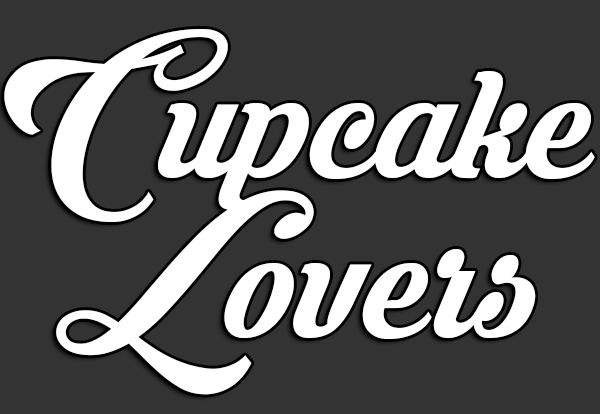
<style>
.page{position:relative;width:600px;height:414px;background:#333333}
.page>*{position:absolute;margin:0}
.t1{font:190px/160px "KrinkesDecorPERSONALUSE";color:#ffffff}
</style>
<div class="page">
<p class="t1" style="left:4px;top:29px;width:591px;height:366px;text-align:center">Cupcake<br>Lovers</p>
</div>
